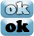
<style>
.page{position:relative;width:34px;height:36px}
.page>*{position:absolute;margin:0}
.t1{font:18px "CooperBlack"}
.t2{font:18px "CooperBlack";color:#000000}
</style>
<div class="page">
<p class="t1" style="left:5px;top:2px;width:25px;height:13px">ok</p>
<p class="t2" style="left:5px;top:20px;width:25px;height:13px">ok</p>
</div>
